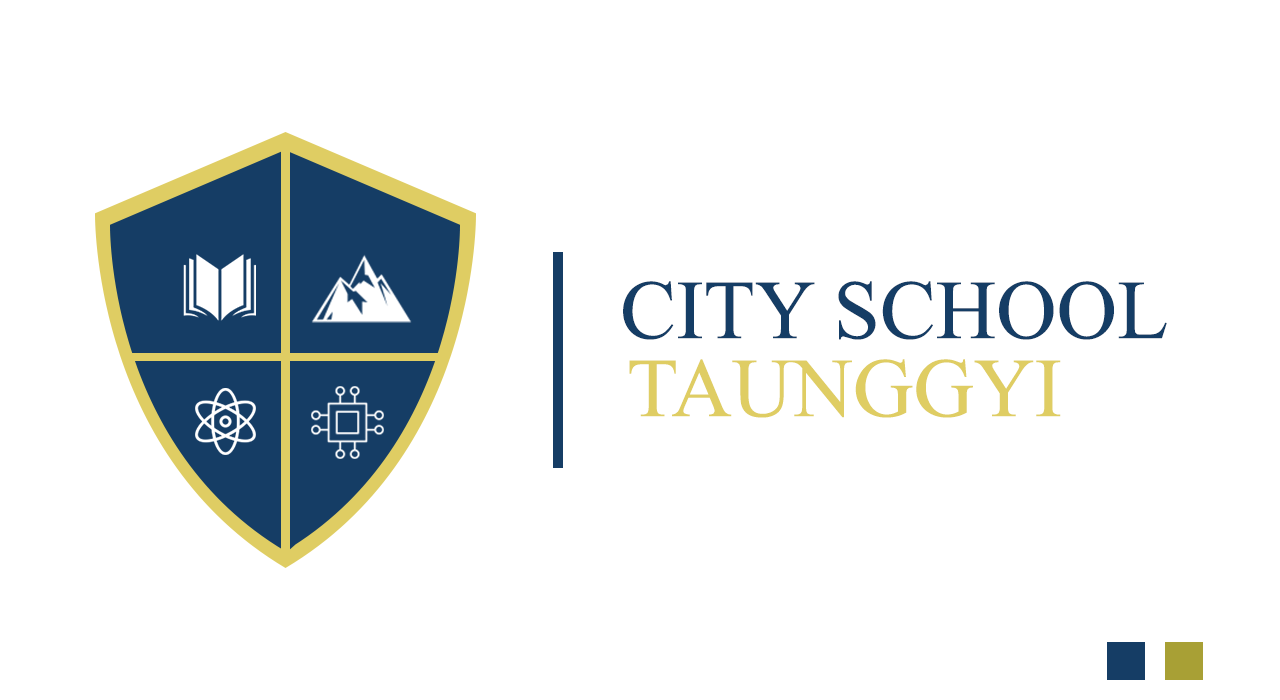
<style>
.page{position:relative;width:1280px;height:700px;background:#ffffff}
.page>*{position:absolute;margin:0}
.t1{font:125px "Microsoft-Himalaya";color:#153d65}
.t2{font:125px "Microsoft-Himalaya";color:#dfcd63}
</style>
<div class="page">
<p class="t1" style="left:623px;top:281px;width:544px;height:59px">CITY SCHOOL</p>
<p class="t2" style="left:629px;top:359px;width:432px;height:59px">TAUNGGYI</p>
</div>
